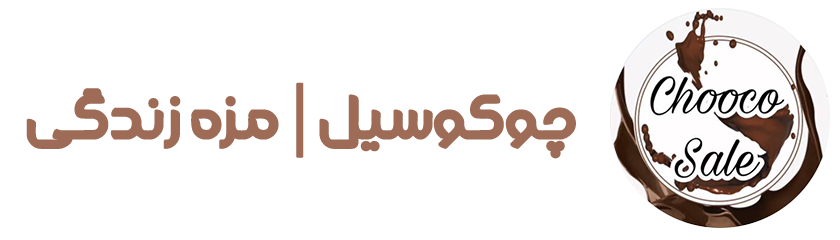
<style>
.page{position:relative;width:840px;height:240px;background:#ffffff}
.page>*{position:absolute;margin:0}
.t1{font:73px "Filimo";color:#9d6b56;font-weight:bold}
.t2{font:73px "MyriadPro-Regular";color:#9d6b56;font-weight:bold}
</style>
<div class="page">
<p class="t1" style="left:26px;top:82px;width:550px;height:77px">چوکوسیل <span class="t2">|</span> مزه زندگی</p>
</div>
